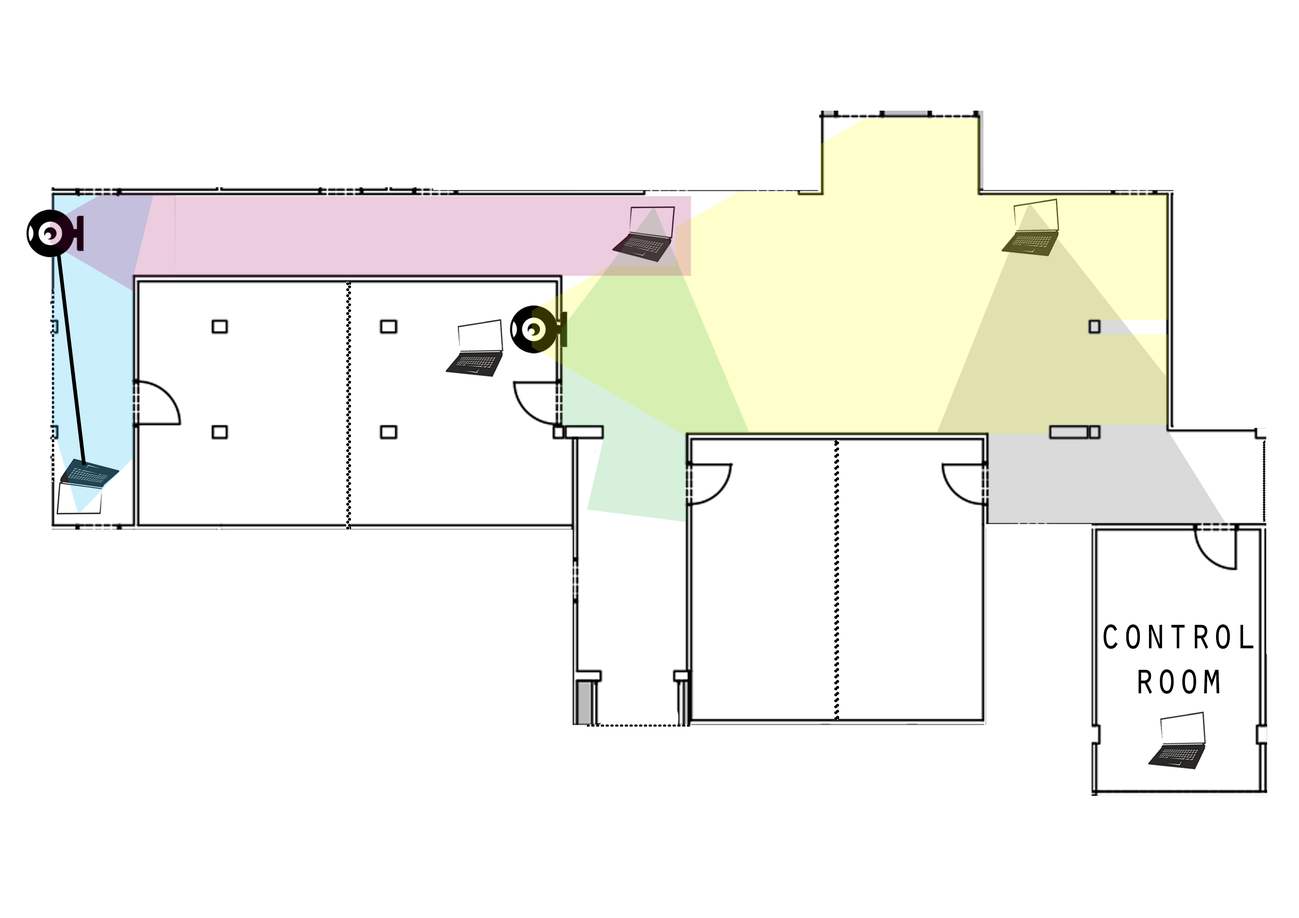
<style>
.page{position:relative;width:1299px;height:918px;background:#ffffff}
.page>*{position:absolute;margin:0}
.t1{font:44.9px "OratorStd";color:#000000;scale:0.83 1}
</style>
<div class="page">
<p class="t1" style="left:1103px;top:624px;width:150px;height:70px;text-align:center">control<br>room</p>
</div>
